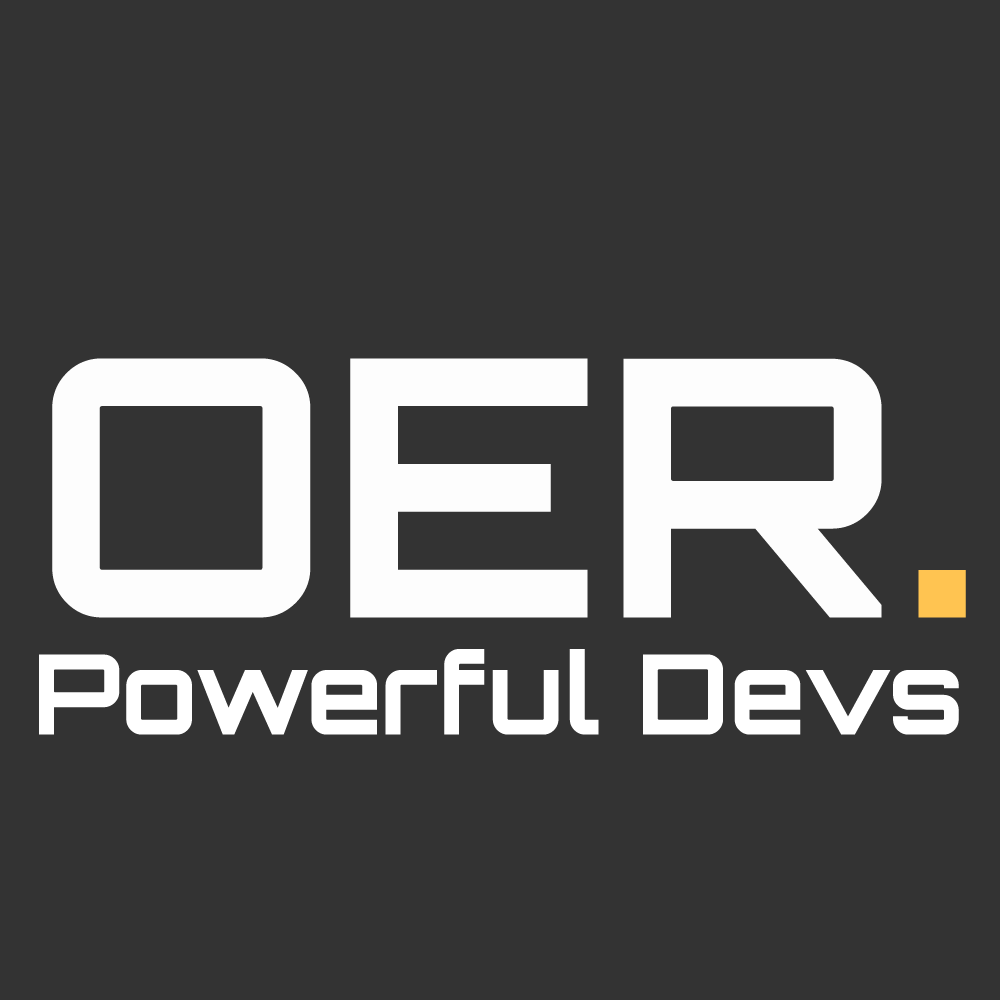
<style>
.page{position:relative;width:1000px;height:1000px;background:#333333}
.page>*{position:absolute;margin:0}
.t1{font:359.5px "Orbitron-Bold";color:#fdfdfd}
.t2{font:359.5px "Orbitron-Bold";color:#ffc451}
.t3{font:26.6px "Orbitron-Bold";color:#ffffff}
</style>
<div class="page">
<p class="t1" style="left:52px;top:358px;width:914px;height:260px">OER<span class="t2">.</span></p>
<p class="t3" style="left:39px;top:649px;width:920px;height:86px">Powerful Devs</p>
</div>
